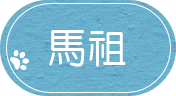
<style>
.page{position:relative;width:176px;height:96px}
.page>*{position:absolute;margin:0}
.t1{font:40px "DFYuan-W5-WIN-BF";color:#ffffff}
</style>
<div class="page">
<p class="t1" style="left:49px;top:30px;width:77px;height:37px">馬祖</p>
</div>
